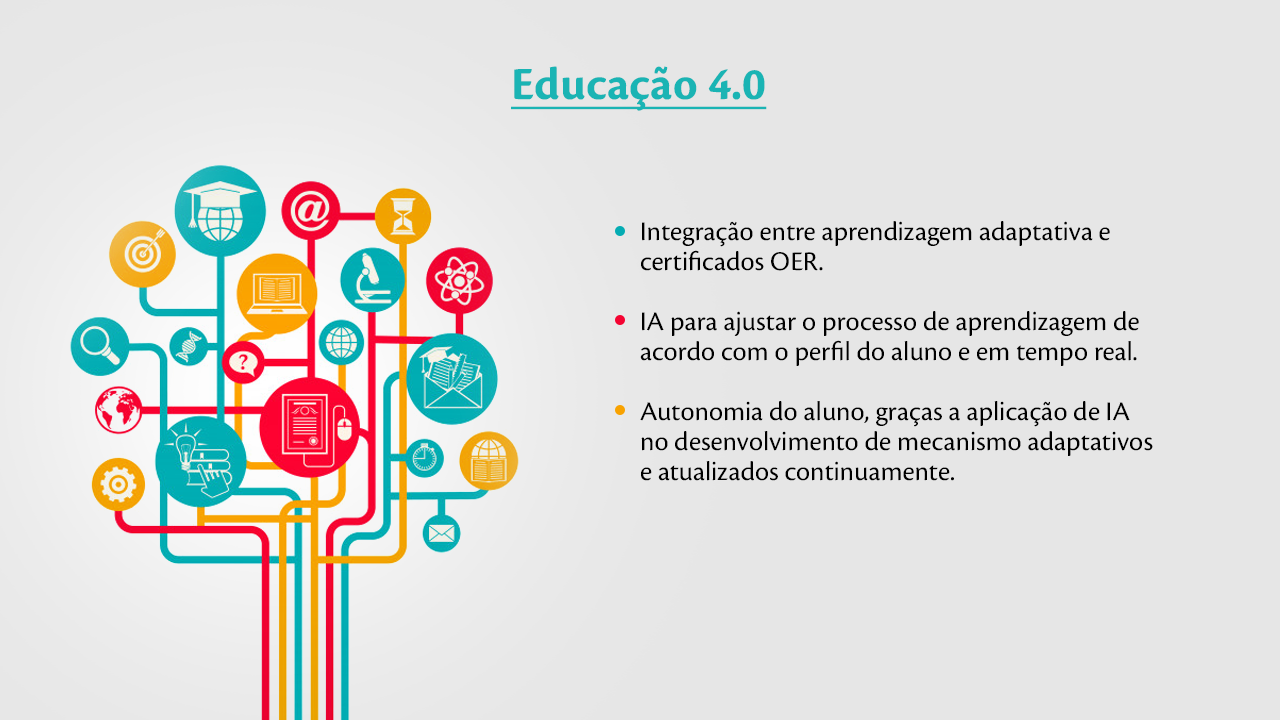
<style>
.page{position:relative;width:1280px;height:720px;background:#e6e6e6}
.page>*{position:absolute;margin:0}
.t1{font:48px "CronosPro-Bold";color:#1ab4b4;text-decoration:underline}
.t2{font:28px/30px "CronosPro-Regular";color:#000000}
</style>
<div class="page">
<p class="t1" style="left:511px;top:66px;width:256px;height:45px">Educação 4.0</p>
<p class="t2" style="left:640px;top:221px;width:513px;height:260px">Integração entre aprendizagem adaptativa e certificados OER.<br><br>IA para ajustar o processo de aprendizagem de acordo com o perfil do aluno e em tempo real.<br><br>Autonomia do aluno, graças a aplicação de IA no desenvolvimento de mecanismo adaptativos e atualizados continuamente.</p>
</div>
